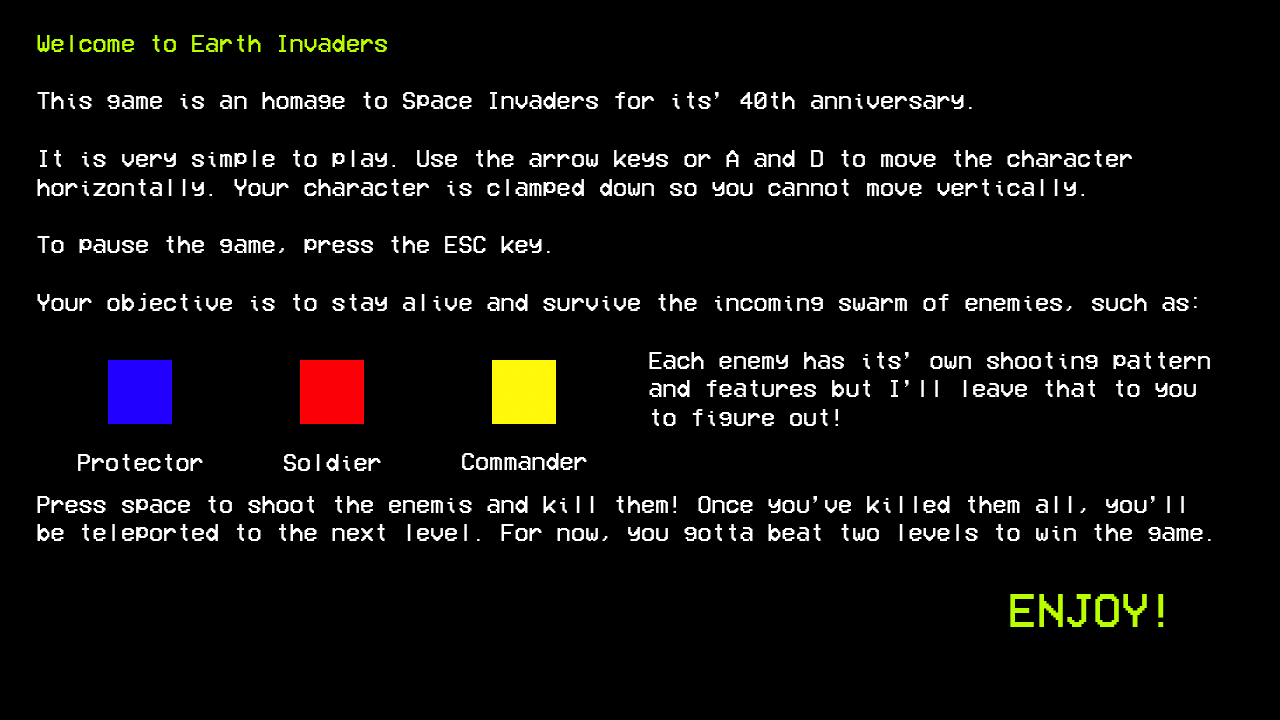
<style>
.page{position:relative;width:1280px;height:720px;background:#000000}
.page>*{position:absolute;margin:0}
.t1{font:24px "VCROSDMono";color:#ffffff}
.t2{font:24px "VCROSDMono";color:#baff00}
.t3{font:48px "VCROSDMono";color:#baff00}
</style>
<div class="page">
<p class="t1" style="left:37px;top:35px;width:1174px;height:592px"><span class="t2">Welcome to Earth Invaders<br></span><br>This game is an homage to Space Invaders for its’ 40th anniversary.<br><br>It is very simple to play. Use the arrow keys or A and D to move the character <br>horizontally. Your character is clamped down so you cannot move vertically. <br><br>To pause the game, press the ESC key.<br><br>Your objective is to stay alive and survive the incoming swarm of enemies, such as:<br><br>                 Each enemy has its’ own shooting pattern<br>                 and features but I’ll leave that to you<br>                 to figure out! <br><br><br>Press space to shoot the enemis and kill them! Once you’ve killed them all, you’ll<br>be teleported to the next level. For now, you gotta beat two levels to win the game.<br><br><span class="t3">                           ENJOY!</span></p>
<p class="t1" style="left:78px;top:454px;width:125px;height:17px">Protector</p>
<p class="t1" style="left:284px;top:454px;width:97px;height:17px">Soldier</p>
<p class="t1" style="left:462px;top:453px;width:125px;height:17px">Commander</p>
</div>
